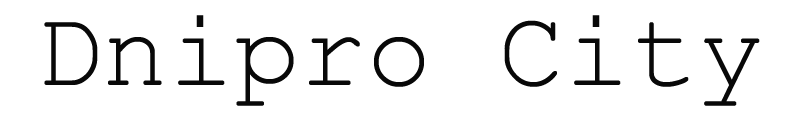
<style>
.page{position:relative;width:800px;height:133px;background:#ffffff}
.page>*{position:absolute;margin:0}
.t1{font:110px "Rod";color:#080808}
</style>
<div class="page">
<p class="t1" style="left:44px;top:15px;width:716px;height:91px">Dnipro City</p>
</div>
